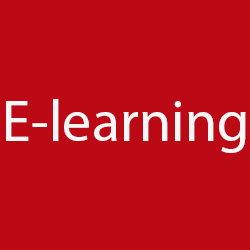
<style>
.page{position:relative;width:250px;height:250px;background:#bc0916}
.page>*{position:absolute;margin:0}
.t1{font:58.3px "MyriadPro-Regular";color:#f8f6f6}
</style>
<div class="page">
<p class="t1" style="left:6px;top:99px;width:240px;height:54px">E-learning</p>
</div>
